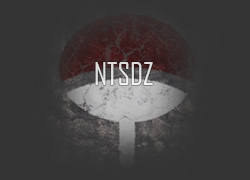
<style>
.page{position:relative;width:250px;height:180px;background:#333333}
.page>*{position:absolute;margin:0}
.t1{font:30px "AgencyFB-Reg";color:#e0e0e0}
</style>
<div class="page">
<p class="t1" style="left:95px;top:62px;width:58px;height:23px">NTSDZ</p>
</div>
